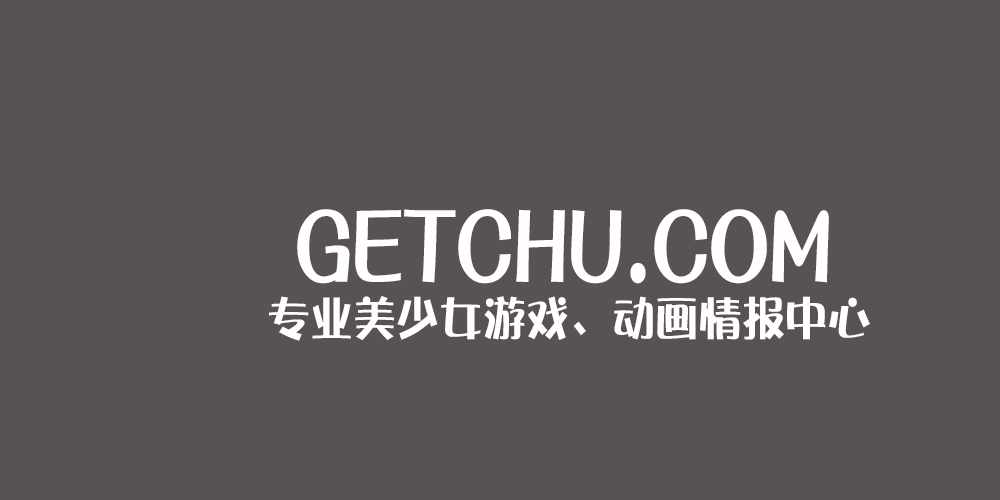
<style>
.page{position:relative;width:1000px;height:500px;background:#585353}
.page>*{position:absolute;margin:0}
.t1{font:107.9px "DFPPOP3W12";color:#fffdfd;scale:0.76 1}
.t2{font:47px "DFPPOP3W12";color:#fffdfd;scale:0.92 1}
</style>
<div class="page">
<p class="t1" style="left:297px;top:209px;width:532px;height:75px">GETCHU.COM</p>
<p class="t2" style="left:269px;top:296px;width:601px;height:45px">专业美少女游戏、动画情报中心</p>
</div>
